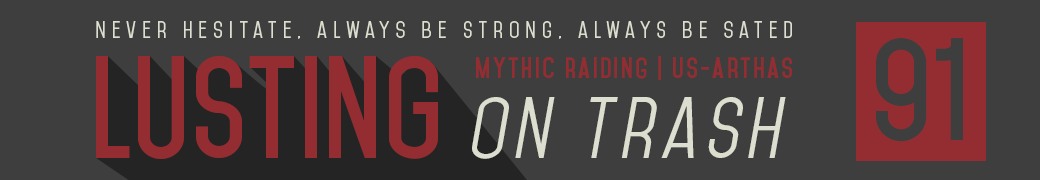
<style>
.page{position:relative;width:1040px;height:180px;background:#3e3e3e}
.page>*{position:absolute;margin:0}
.t1{font:20.8px "Mohave";letter-spacing:0.296em;color:#dcdfcf}
.t2{font:125px "Mohave-Bold";color:#3e3e3e}
.t3{font:125px "Mohave-Bold";color:#942d32}
.t4{font:25px "Mohave-Bold";letter-spacing:0.1em;color:#942d32}
.t5{font:75px "Mohave-Italic";letter-spacing:0.1em;color:#dcdfcf}
</style>
<div class="page">
<p class="t1" style="left:96px;top:21px;width:696px;height:18px">Never hesitate, always be strong, always be sated</p>
<p class="t2" style="left:876px;top:38px;width:87px;height:104px">91</p>
<p class="t3" style="left:96px;top:56px;width:342px;height:103px">LUSTING</p>
<p class="t4" style="left:476px;top:56px;width:316px;height:24px">mythic raiding | us-arthas</p>
<p class="t5" style="left:472px;top:97px;width:314px;height:62px">on trash</p>
</div>
